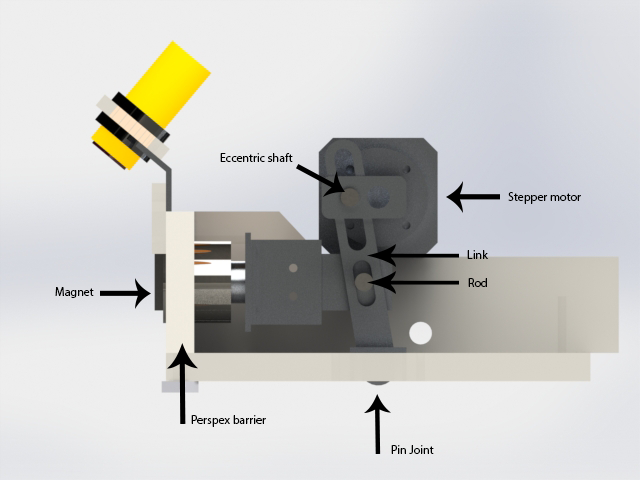
<style>
.page{position:relative;width:640px;height:480px}
.page>*{position:absolute;margin:0}
.t1{font:12px "MyriadPro-Regular";color:#000000}
</style>
<div class="page">
<p class="t1" style="left:220px;top:153px;width:73px;height:9px">Eccentric shaft</p>
<p class="t1" style="left:508px;top:192px;width:73px;height:12px">Stepper motor</p>
<p class="t1" style="left:467px;top:250px;width:21px;height:9px">Link</p>
<p class="t1" style="left:468px;top:278px;width:19px;height:9px">Rod</p>
<p class="t1" style="left:55px;top:287px;width:39px;height:11px">Magnet</p>
<p class="t1" style="left:191px;top:415px;width:75px;height:12px">Perspex barrier</p>
<p class="t1" style="left:391px;top:445px;width:43px;height:9px">Pin Joint</p>
</div>
